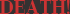
<style>
.page{position:relative;width:70px;height:14px;background:#343131}
.page>*{position:absolute;margin:0}
.t1{font:20px "LondonFill";letter-spacing:0.005em;color:#cc3333}
</style>
<div class="page">
<p class="t1" style="left:0px;top:0px;width:70px;height:14px">DEATH!</p>
</div>
